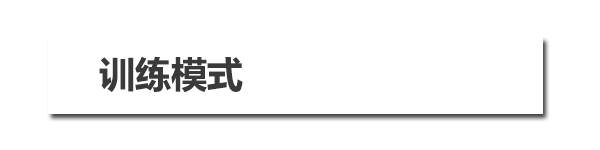
<style>
.page{position:relative;width:600px;height:150px;background:#ffffff}
.page>*{position:absolute;margin:0}
.t1{font:36px "MicrosoftYaHei-Bold";color:#3a3a3a}
</style>
<div class="page">
<p class="t1" style="left:99px;top:56px;width:144px;height:37px">训练模式</p>
</div>
